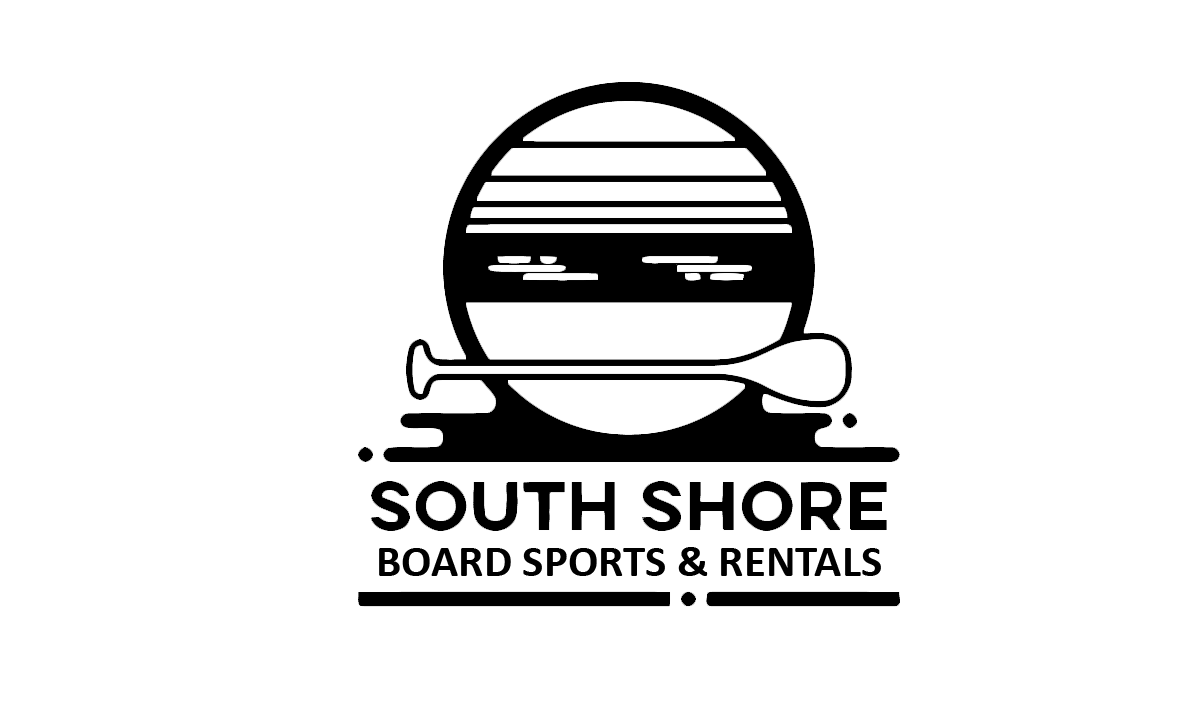
<style>
.page{position:relative;width:1201px;height:703px;background:#ffffff}
.page>*{position:absolute;margin:0}
.t1{font:45px "Calibri-Bold";color:#000000}
</style>
<div class="page">
<p class="t1" style="left:379px;top:547px;width:502px;height:29px">BOARD SPORTS &amp; RENTALS</p>
</div>
